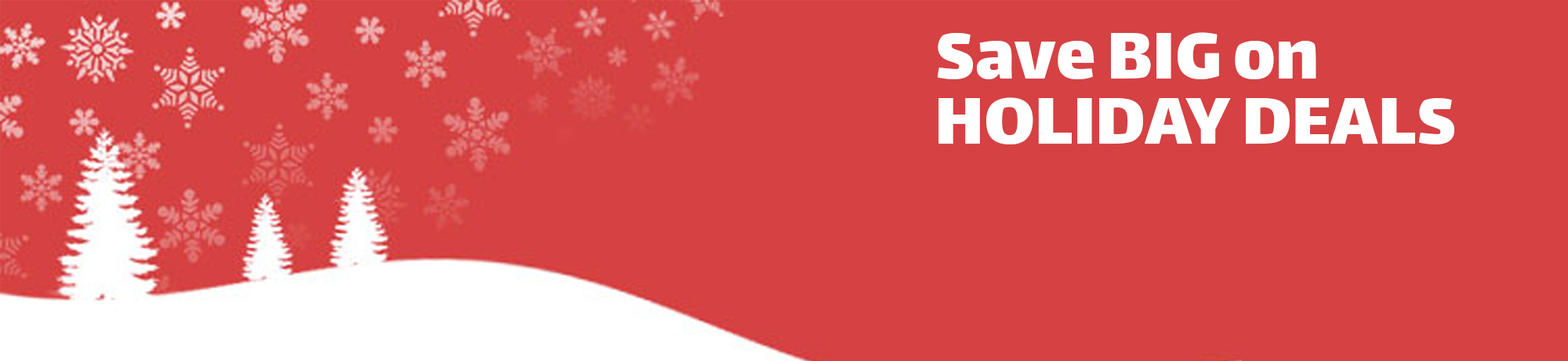
<style>
.page{position:relative;width:1568px;height:361px;background:#d64143}
.page>*{position:absolute;margin:0}
.t1{font:19.1px "Lalezar-Regular";color:#ffffff}
</style>
<div class="page">
<p class="t1" style="left:937px;top:32px;width:379px;height:47px">Save BIG on</p>
<p class="t1" style="left:938px;top:97px;width:516px;height:47px">HOLIDAY DEALS</p>
</div>
